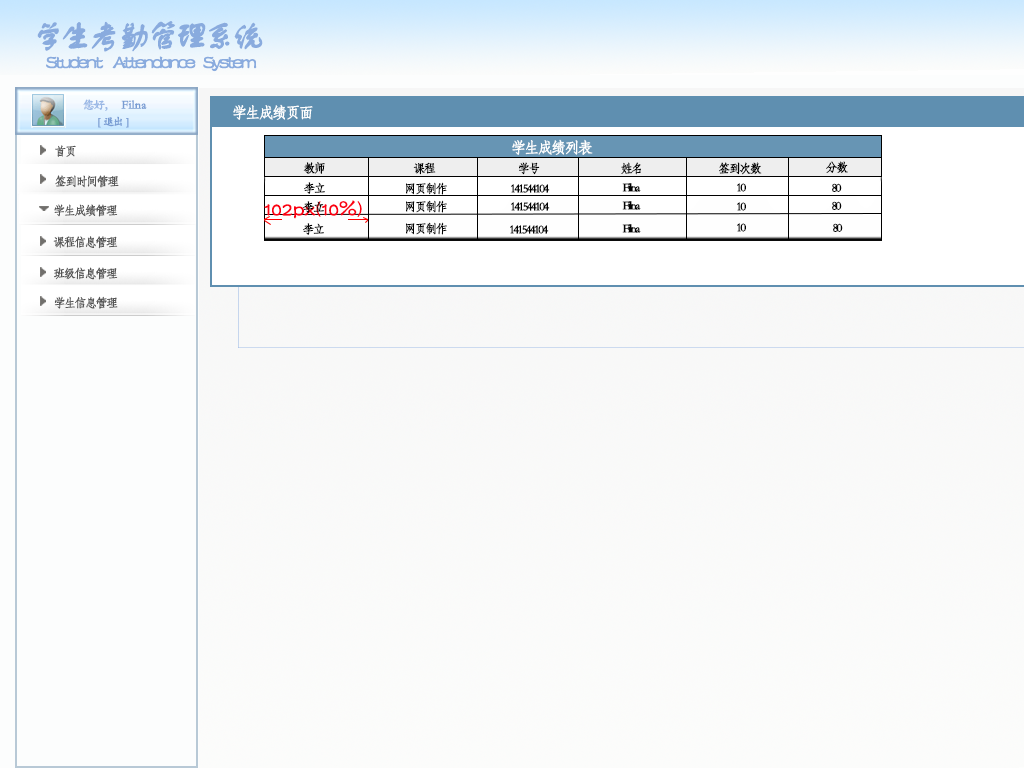
<style>
.page{position:relative;width:1024px;height:768px}
.page>*{position:absolute;margin:0}
.t1{font:32.7px "FZSTK--GBK1-0";letter-spacing:-0.15em;color:#89abde;font-weight:bold}
.t2{font:19.6px "FZSTK--GBK1-0";letter-spacing:-0.15em;color:#89abde;font-weight:bold}
.t3{font:12px "STKaiti";letter-spacing:-0.15em;color:#99b7e5;font-weight:bold}
.t4{font:12px "STKaiti";color:#789cd3;font-weight:bold}
.t5{font:15.3px "STFangsong";letter-spacing:-0.15em;color:#fdfefe;font-weight:bold}
.t6{font:10.9px "STKaiti";letter-spacing:-0.15em;color:#789cd3;font-weight:bold}
.t7{font:12px "STFangsong";letter-spacing:-0.15em;color:#555555;font-weight:bold}
.t8{font:12px "STFangsong";letter-spacing:-0.15em;color:#020202;font-weight:bold}
.t9{font:19.6px "FZSTK--GBK1-0";color:#fb0012;font-weight:bold}
</style>
<div class="page">
<p class="t1" style="left:37px;top:21px;width:226px;height:31px">学生考勤管理系统</p>
<p class="t2" style="left:46px;top:56px;width:211px;height:16px">Student     Attendance    System</p>
<p class="t3" style="left:83px;top:99px;width:25px;height:12px">您好，</p>
<p class="t4" style="left:121px;top:100px;width:26px;height:9px">Filna</p>
<p class="t5" style="left:233px;top:104px;width:80px;height:16px">学生成绩页面</p>
<p class="t6" style="left:98px;top:116px;width:31px;height:12px">[   退出   ]</p>
<p class="t7" style="left:55px;top:145px;width:21px;height:12px">首页</p>
<p class="t5" style="left:512px;top:139px;width:81px;height:16px">学生成绩列表</p>
<p class="t8" style="left:826px;top:161px;width:22px;height:13px">分数</p>
<p class="t8" style="left:303px;top:162px;width:22px;height:12px">教师</p>
<p class="t8" style="left:413px;top:162px;width:23px;height:13px">课程</p>
<p class="t8" style="left:519px;top:162px;width:21px;height:13px">学号</p>
<p class="t8" style="left:621px;top:162px;width:20px;height:13px">姓名</p>
<p class="t8" style="left:719px;top:162px;width:43px;height:13px">签到次数</p>
<p class="t7" style="left:55px;top:175px;width:64px;height:13px">签到时间管理</p>
<p class="t8" style="left:304px;top:182px;width:21px;height:12px">李立</p>
<p class="t8" style="left:406px;top:182px;width:41px;height:13px">网页制作</p>
<p class="t8" style="left:511px;top:184px;width:39px;height:9px">141544104</p>
<p class="t8" style="left:622px;top:183px;width:19px;height:9px">Filna</p>
<p class="t8" style="left:737px;top:183px;width:9px;height:9px">10</p>
<p class="t8" style="left:832px;top:183px;width:10px;height:9px">80</p>
<p class="t7" style="left:54px;top:204px;width:64px;height:13px">学生成绩管理</p>
<p class="t9" style="left:264px;top:200px;width:98px;height:19px">102px(10%)</p>
<p class="t8" style="left:303px;top:201px;width:21px;height:12px">李立</p>
<p class="t8" style="left:406px;top:200px;width:41px;height:13px">网页制作</p>
<p class="t8" style="left:511px;top:202px;width:39px;height:9px">141544104</p>
<p class="t8" style="left:622px;top:201px;width:19px;height:9px">Filna</p>
<p class="t8" style="left:737px;top:202px;width:9px;height:9px">10</p>
<p class="t8" style="left:832px;top:201px;width:10px;height:9px">80</p>
<p class="t8" style="left:406px;top:222px;width:41px;height:13px">网页制作</p>
<p class="t8" style="left:303px;top:223px;width:21px;height:12px">李立</p>
<p class="t8" style="left:510px;top:225px;width:39px;height:9px">141544104</p>
<p class="t8" style="left:622px;top:224px;width:19px;height:9px">Filna</p>
<p class="t8" style="left:737px;top:223px;width:9px;height:9px">10</p>
<p class="t8" style="left:833px;top:223px;width:10px;height:9px">80</p>
<p class="t7" style="left:53px;top:236px;width:65px;height:13px">课程信息管理</p>
<p class="t7" style="left:54px;top:267px;width:64px;height:13px">班级信息管理</p>
<p class="t7" style="left:54px;top:296px;width:64px;height:13px">学生信息管理</p>
</div>
